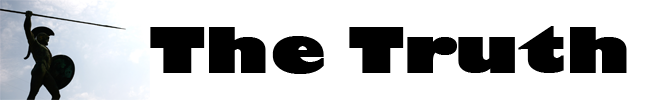
<style>
.page{position:relative;width:646px;height:100px;background:#ffffff}
.page>*{position:absolute;margin:0}
.t1{font:60px "GillSans-UltraBold";color:#000000;font-weight:bold;scale:1.3 1}
</style>
<div class="page">
<p class="t1" style="left:150px;top:26px;width:477px;height:48px">The Truth</p>
</div>
